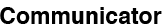
<style>
.page{position:relative;width:163px;height:25px;background:#ffffff}
.page>*{position:absolute;margin:0}
.t1{font:23px "Helvetica-Bold";color:#000000}
</style>
<div class="page">
<p class="t1" style="left:0px;top:7px;width:162px;height:17px">Communicator</p>
</div>
